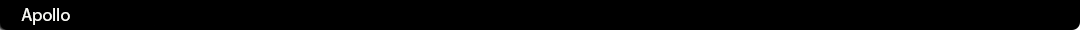
<style>
.page{position:relative;width:1080px;height:30px;background:#000000}
.page>*{position:absolute;margin:0}
.t1{font:18px "MyriadPro-Regular";color:#f9f9f4}
</style>
<div class="page">
<p class="t1" style="left:21px;top:8px;width:49px;height:17px">Apollo</p>
</div>
